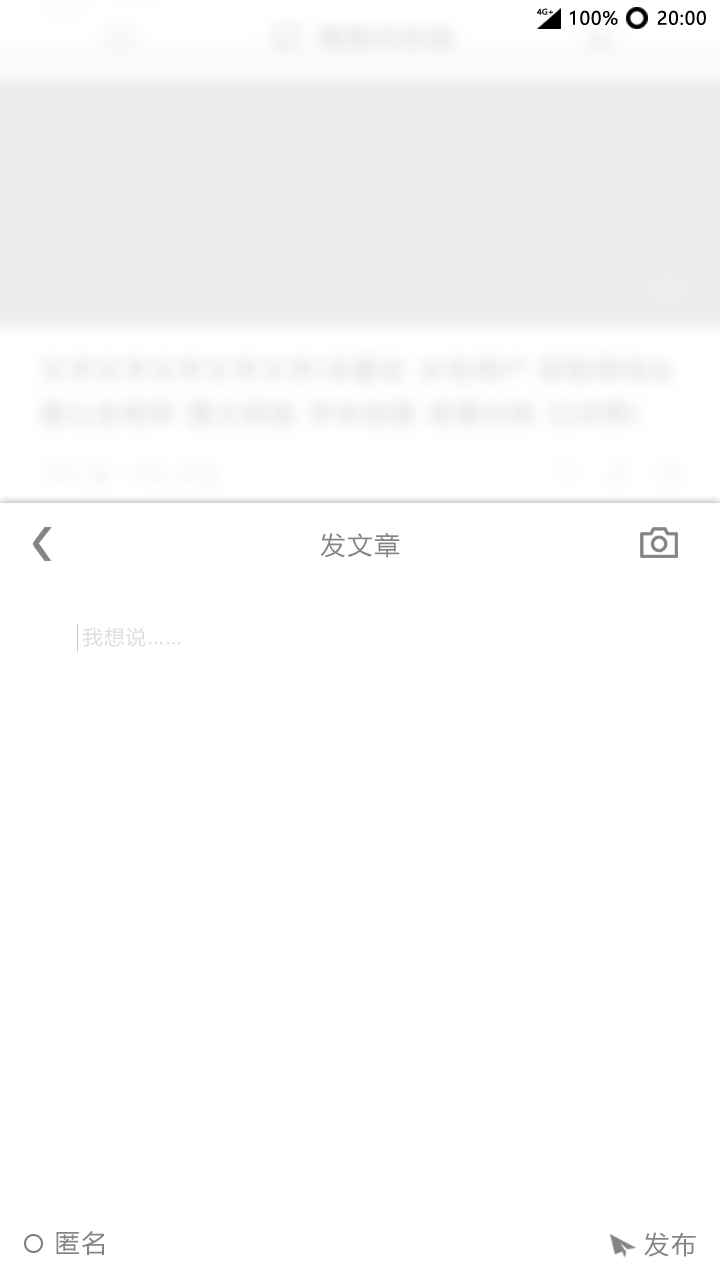
<style>
.page{position:relative;width:720px;height:1280px;background:#ffffff}
.page>*{position:absolute;margin:0}
.t1{font:7.8px "MicrosoftYaHei";letter-spacing:0.01em;color:#0f0f0f;scale:1.03 1}
.t2{font:18px "MicrosoftYaHei";letter-spacing:0.05em;color:#000000}
.t3{font:25px "MicrosoftYaHei";letter-spacing:0.08em;color:#848484}
.t4{font:20px "MicrosoftYaHei";letter-spacing:0.08em;color:#dddddd}
</style>
<div class="page">
<p class="t1" style="left:537px;top:8px;width:16px;height:7px">4G+</p>
<p class="t2" style="left:570px;top:10px;width:48px;height:15px">100%</p>
<p class="t2" style="left:657px;top:10px;width:49px;height:15px">20:00</p>
<p class="t3" style="left:320px;top:533px;width:80px;height:25px">发文章</p>
<p class="t4" style="left:83px;top:627px;width:98px;height:20px">我想说……</p>
<p class="t3" style="left:56px;top:1231px;width:48px;height:24px">匿名</p>
<p class="t3" style="left:644px;top:1232px;width:52px;height:25px">发布</p>
</div>
